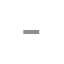
<style>
.page{position:relative;width:64px;height:64px;background:#ffffff}
.page>*{position:absolute;margin:0}
.t1{font:60.3px "SegoeUISymbol";color:#8f8f8f}
</style>
<div class="page">
<p class="t1" style="left:23px;top:30px;width:17px;height:4px">-</p>
</div>
